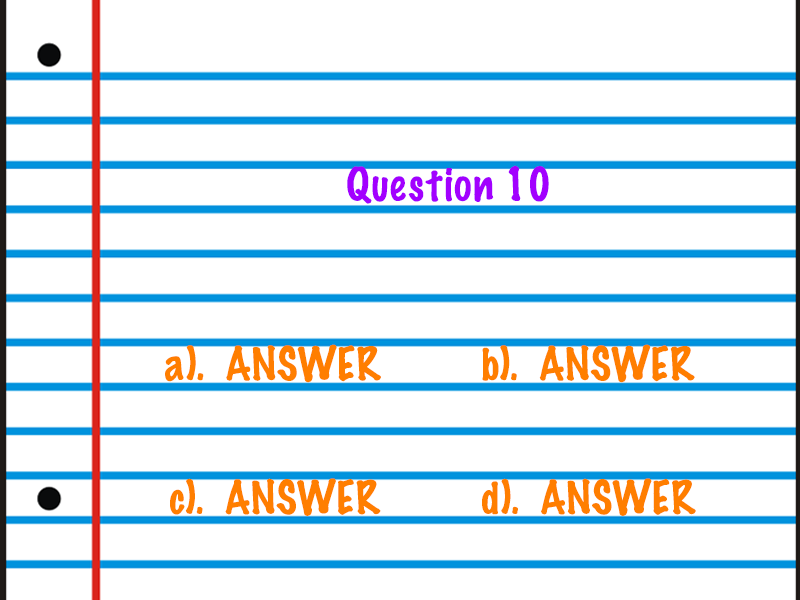
<style>
.page{position:relative;width:800px;height:600px;background:#ffffff}
.page>*{position:absolute;margin:0}
.t1{font:41.7px "MarkerFelt-Thin";color:#a200ff}
.t2{font:41.7px "MarkerFelt-Thin";color:#ff7e00}
</style>
<div class="page">
<p class="t1" style="left:347px;top:165px;width:202px;height:39px">Question 10</p>
<p class="t2" style="left:165px;top:344px;width:216px;height:39px">a).  ANSWER</p>
<p class="t2" style="left:482px;top:344px;width:213px;height:39px">b).  ANSWER</p>
<p class="t2" style="left:170px;top:478px;width:211px;height:38px">c).  ANSWER</p>
<p class="t2" style="left:482px;top:478px;width:214px;height:38px">d).  ANSWER</p>
</div>
